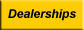
<style>
.page{position:relative;width:84px;height:30px;background:#ffcc00}
.page>*{position:absolute;margin:0}
.t1{font:12px "Arial-BoldItalicMT";color:#000000}
</style>
<div class="page">
<p class="t1" style="left:8px;top:9px;width:68px;height:12px">Dealerships</p>
</div>
